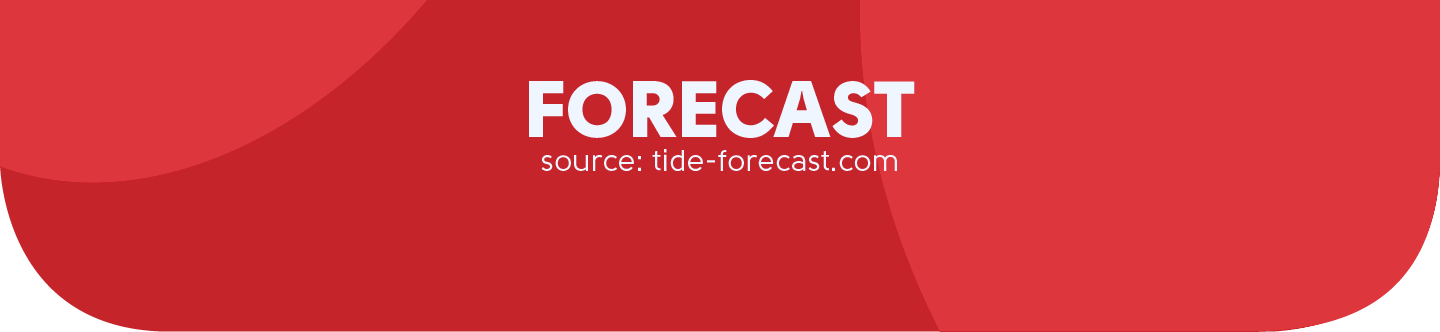
<style>
.page{position:relative;width:1440px;height:332px;background:#dd363d}
.page>*{position:absolute;margin:0}
.t1{font:80px "Solomon-Sans-Black";color:#f0f6ff}
.t2{font:30px "Solomon-Sans-Normal";color:#f0f6ff}
</style>
<div class="page">
<p class="t1" style="left:529px;top:80px;width:386px;height:58px">FORECAST</p>
<p class="t2" style="left:541px;top:149px;width:356px;height:22px">source: tide-forecast.com</p>
</div>
